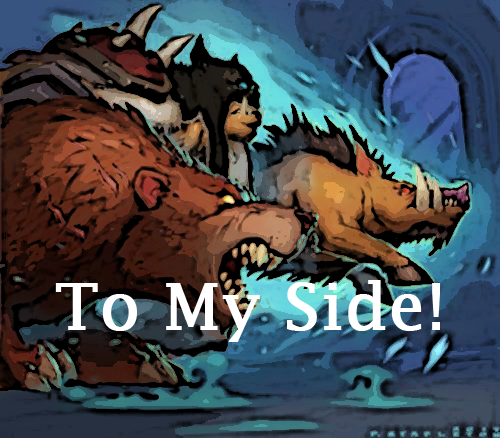
<style>
.page{position:relative;width:500px;height:438px}
.page>*{position:absolute;margin:0}
.t1{font:64px "LucidaFax";color:#ffffff;font-weight:bold}
</style>
<div class="page">
<p class="t1" style="left:55px;top:280px;width:385px;height:62px">To My Side!</p>
</div>
